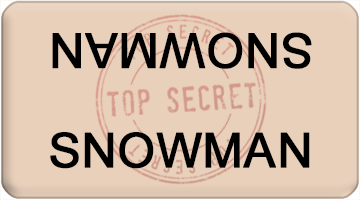
<style>
.page{position:relative;width:360px;height:200px;background:#e8d0bb}
.page>*{position:absolute;margin:0}
.t1{font:48px "ArialMT";color:#000000;font-weight:bold}
</style>
<div class="page">
<p class="t1" style="left:52px;top:32px;width:260px;height:37px;rotate:180deg">SNOWMAN</p>
<p class="t1" style="left:50px;top:132px;width:260px;height:37px">SNOWMAN</p>
</div>
